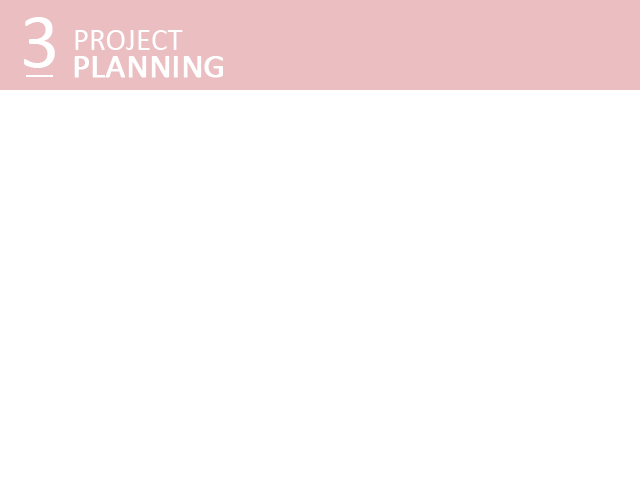
<style>
.page{position:relative;width:640px;height:480px;background:#ffffff}
.page>*{position:absolute;margin:0}
.t1{font:77.7px "Calibri";color:#ffffff}
.t2{font:30.9px "Calibri";color:#ffffff}
.t3{font:33.8px "Calibri";color:#ffffff;font-weight:bold}
</style>
<div class="page">
<p class="t1" style="left:23px;top:17px;width:32px;height:51px">3</p>
<p class="t2" style="left:75px;top:30px;width:108px;height:20px">PROJECT</p>
<p class="t3" style="left:74px;top:56px;width:149px;height:22px">PLANNING</p>
</div>
